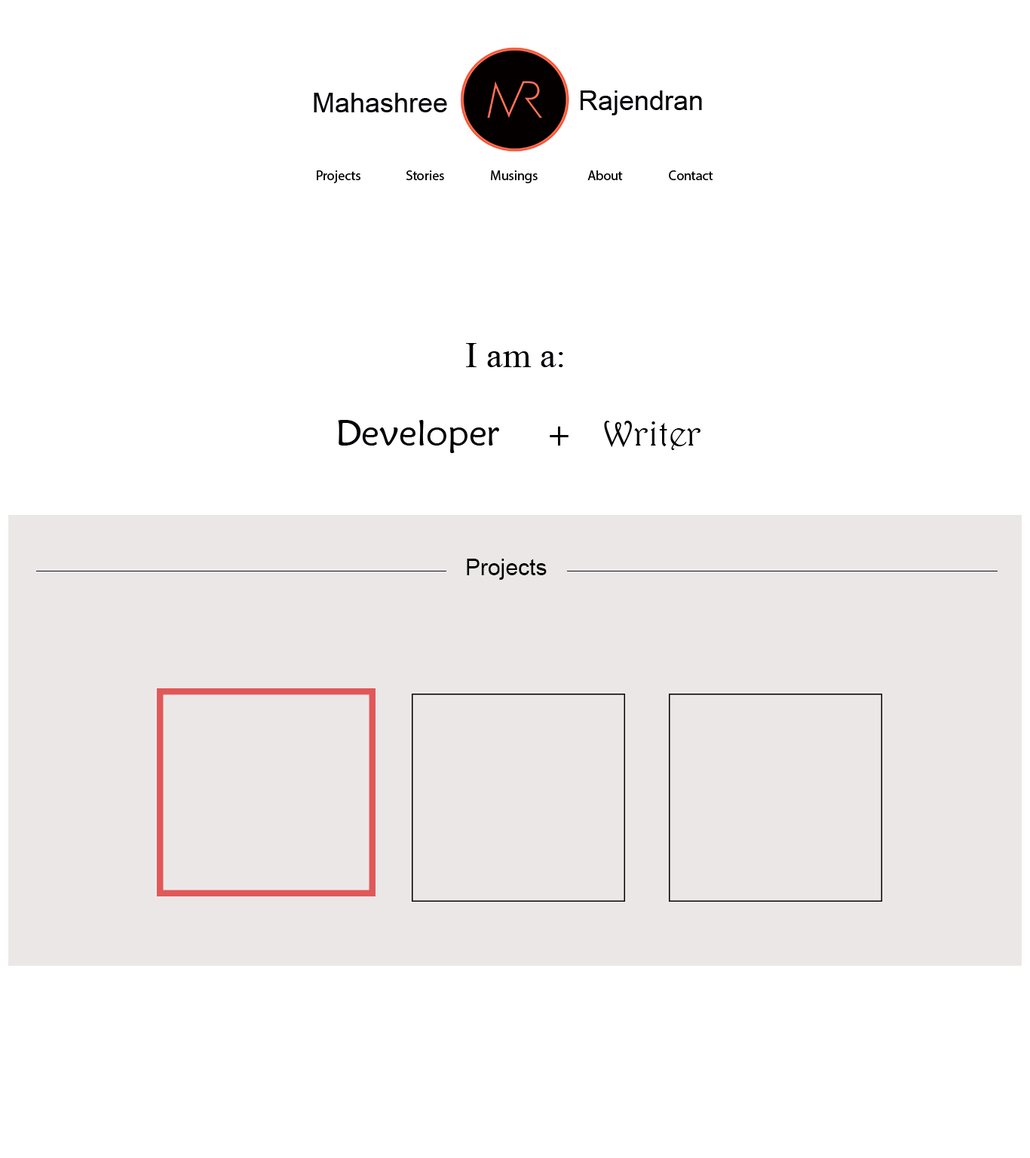
<style>
.page{position:relative;width:1030px;height:1158px;background:#ffffff}
.page>*{position:absolute;margin:0}
.t1{font:27.1px "ArialMT";color:#000004}
.t2{font:13.6px "MyriadPro-Regular";color:#000004}
.t3{font:36.2px/39.2px "MaiandraGD-Regular";color:#000004}
.t4{font:13.6px/39.2px "MyriadPro-Regular";color:#000004}
.t5{font:36.2px/39.2px "MongolianBaiti";color:#000004}
.t6{font:36.2px/39.2px "MyriadPro-Regular";color:#000004}
.t7{font:36.2px/39.2px "Harrington";color:#000004}
.t8{font:22.6px "ArialMT";color:#000004}
</style>
<div class="page">
<p class="t1" style="left:314px;top:93px;width:133px;height:19px">Mahashree</p>
<p class="t1" style="left:580px;top:90px;width:122px;height:25px">Rajendran</p>
<p class="t2" style="left:317px;top:170px;width:396px;height:13px">Projects        Stories       Musings  About  Contact</p>
<p class="t3" style="left:338px;top:343px;width:362px;height:110px"><span class="t4">                    </span><span class="t5">I am a:<br><br></span>Developer<span class="t6">    +     </span><span class="t7">Writer</span></p>
<p class="t8" style="left:467px;top:559px;width:80px;height:21px">Projects</p>
</div>
